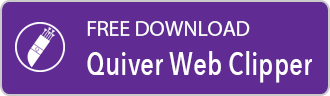
<style>
.page{position:relative;width:330px;height:96px;background:#602c94}
.page>*{position:absolute;margin:0}
.t1{font:22px "MyriadPro-Regular";color:#fffefe}
.t2{font:32px "AvenirNextCondensed-Medium";color:#fffefe}
</style>
<div class="page">
<p class="t1" style="left:87px;top:21px;width:163px;height:15px">FREE DOWNLOAD</p>
<p class="t2" style="left:87px;top:51px;width:225px;height:32px">Quiver Web Clipper</p>
</div>
